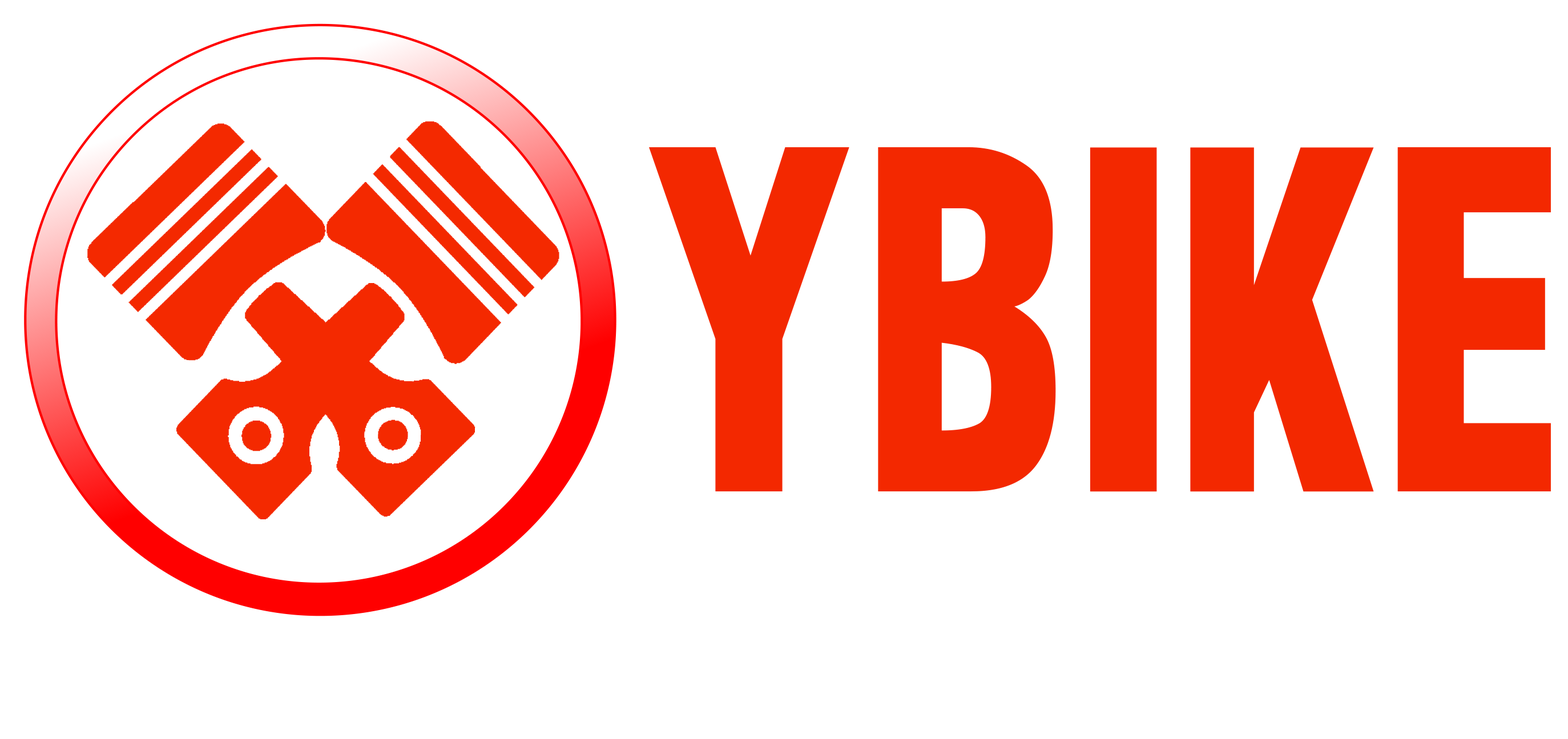
<style>
.page{position:relative;width:1568px;height:739px;background:#ffffff}
.page>*{position:absolute;margin:0}
.t1{font:516.8px "Helvetica-Condensed-Black-Se";color:#f42900;scale:0.8 1}
</style>
<div class="page">
<p class="t1" style="left:649px;top:147px;width:902px;height:345px">YBIKE</p>
</div>
